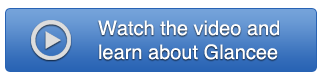
<style>
.page{position:relative;width:320px;height:80px;background:#ffffff}
.page>*{position:absolute;margin:0}
.t1{font:20px "Helvetica";color:#ffffff}
</style>
<div class="page">
<p class="t1" style="left:98px;top:20px;width:181px;height:40px">Watch the video and<br>learn about Glancee</p>
</div>
